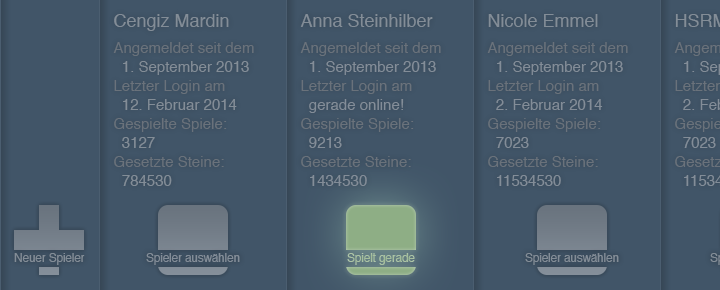
<style>
.page{position:relative;width:720px;height:290px;background:#415568}
.page>*{position:absolute;margin:0}
.t1{font:15px/19px "Helvetica";color:#838d98}
.t2{font:18px/24px "Helvetica";color:#838d98}
.t3{font:18px/26px "Helvetica";color:#838d98}
.t4{font:15px/26px "Helvetica";color:#6a727b}
.t5{font:15px/19px "Helvetica";color:#6a727b}
.t6{font:18px/24px "Helvetica";color:#838d97}
.t7{font:12px "Helvetica";letter-spacing:-0.015em;color:#838d98}
.t8{font:12px "Helvetica";letter-spacing:-0.015em;color:#a8c0a1}
</style>
<div class="page">
<p class="t1" style="left:113px;top:14px;width:141px;height:172px"><span class="t2">Cengiz </span><span class="t3">Mardin<br></span><span class="t4">Angem</span><span class="t5">eldet seit dem <br>  </span>1. September 2013<br><span class="t5">Letzter Login am <br>  </span>12. Februar 2014<br><span class="t5">Gespielte Spiele: <br>  </span>3127<br><span class="t5">Gesetzte Steine: <br>  </span>784530</p>
<p class="t1" style="left:300px;top:14px;width:141px;height:172px"><span class="t6">Anna Steinhilber<br></span><span class="t4">Angem</span><span class="t5">eldet seit dem <br>  </span>1. September 2013<br><span class="t5">Letzter Login am<br>  </span>gerade online!<br><span class="t5">Gespielte Spiele: <br>  </span>9213<br><span class="t5">Gesetzte Steine: <br>  </span>1434530</p>
<p class="t1" style="left:487px;top:14px;width:141px;height:172px"><span class="t2">Nicole Emmel<br></span><span class="t4">Angem</span><span class="t5">eldet seit dem<br>  </span>1. September 2013<br><span class="t5">Letzter Login am<br>  </span>2. Februar 2014<br><span class="t5">Gespielte Spiele: <br>  </span>7023<br><span class="t5">Gesetzte Steine: <br>  </span>11534530</p>
<p class="t7" style="left:14px;top:253px;width:71px;height:12px">Neuer Spieler</p>
<p class="t7" style="left:146px;top:253px;width:94px;height:12px">Spieler auswählen</p>
<p class="t8" style="left:347px;top:253px;width:68px;height:12px">Spielt gerade</p>
<p class="t7" style="left:525px;top:253px;width:94px;height:12px">Spieler auswählen</p>
</div>
